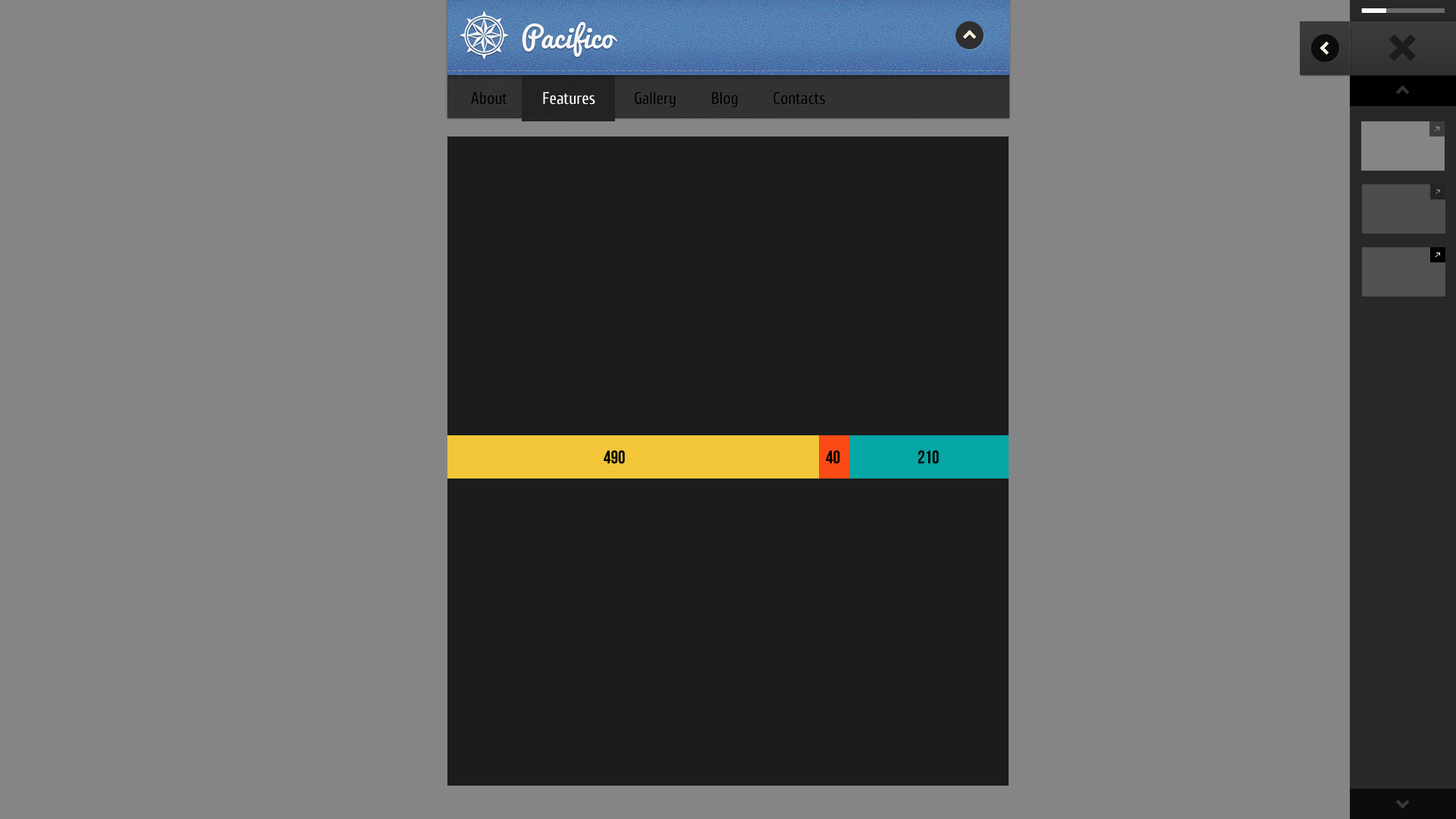
<style>
.page{position:relative;width:1456px;height:819px;background:#858585}
.page>*{position:absolute;margin:0}
.t1{font:28.8px "Pacifico";color:#f7f7f7}
.t2{font:16.7px "Cuprum";color:#010101}
.t3{font:16.7px "Cuprum";color:#ffffff}
.t4{font:16.7px "Cuprum";color:#000000}
</style>
<div class="page">
<p class="t1" style="left:522px;top:22px;width:95px;height:35px">Pacifico</p>
<p class="t2" style="left:471px;top:92px;width:36px;height:13px">About</p>
<p class="t3" style="left:543px;top:92px;width:52px;height:13px">Features</p>
<p class="t4" style="left:635px;top:92px;width:41px;height:16px">Gallery</p>
<p class="t4" style="left:712px;top:92px;width:26px;height:16px">Blog</p>
<p class="t4" style="left:773px;top:92px;width:52px;height:13px">Contacts</p>
</div>
